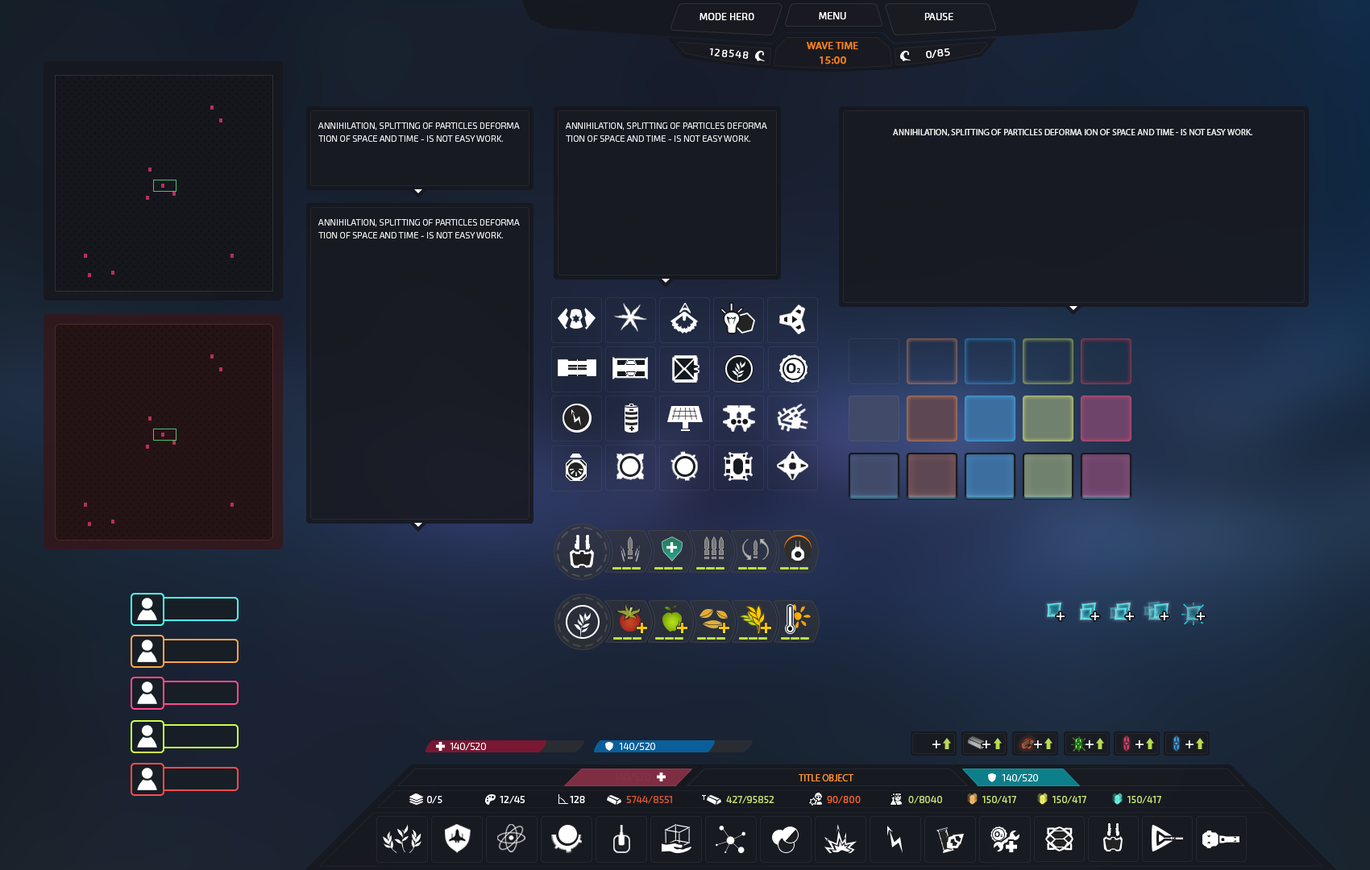
<style>
.page{position:relative;width:1370px;height:870px}
.page>*{position:absolute;margin:0}
.t1{font:9.7px "Exo2.0-Light";color:#ffffff;text-transform:uppercase;font-weight:bold}
.t2{font:9.7px/14.5px "MyriadPro-Regular";color:#f1801c;text-transform:uppercase;font-weight:bold;scale:1.1 1}
.t3{font:10.5px/14.5px "MyriadPro-Regular";color:#f1801c;text-transform:uppercase;font-weight:bold;scale:1.1 1}
.t4{font:9.7px "Exo2.0-Light";letter-spacing:0.12em;color:#ffffff;text-transform:uppercase;font-weight:bold}
.t5{font:9.7px "Exo2.0-Light";color:#ffffff;text-transform:uppercase;font-weight:bold;scale:1.1 1}
.t6{font:8.9px/12.9px "Exo2.0-Light";color:#ffffff;text-transform:uppercase}
.t7{font:8.9px "MyriadPro-Regular";color:#ffffff;text-transform:uppercase}
.t8{font:14.8px "Calibri-Bold";color:#181e25;font-weight:bold}
.t9{font:7.4px "Calibri-Bold";color:#181e25;font-weight:bold}
.t10{font:9.7px "Exo2.0-Light";color:#ffffff;text-transform:uppercase}
.t11{font:9.7px "Exo2.0-Light";color:#853348;text-transform:uppercase}
.t12{font:9.7px "MyriadPro-Regular";color:#fe942d;text-transform:uppercase}
.t13{font:9.7px "Exo2.0-Medium";color:#ffffff;text-transform:uppercase}
.t14{font:9.7px "Exo2.0-Medium";color:#d3562d;text-transform:uppercase}
.t15{font:9.7px "Exo2.0-Medium";color:#c3e172;text-transform:uppercase}
.t16{font:9.7px "Exo2.0-Medium";color:#f1602d;text-transform:uppercase}
.t17{font:8.4px "Calibri-Bold";color:#181e25;font-weight:bold}
.t18{font:4.2px "Calibri-Bold";color:#181e25;font-weight:bold}
</style>
<div class="page">
<p class="t1" style="left:700px;top:13px;width:54px;height:8px">mode hero</p>
<p class="t1" style="left:819px;top:12px;width:27px;height:8px">Menu</p>
<p class="t1" style="left:924px;top:13px;width:29px;height:8px">pause</p>
<p class="t2" style="left:807px;top:42px;width:51px;height:22px;text-align:center">wave time<br><span class="t3">15:00</span></p>
<p class="t4" style="left:709px;top:48px;width:40px;height:11px;rotate:5deg">128548</p>
<p class="t5" style="left:926px;top:48px;width:24px;height:11px;rotate:-6deg">0/85</p>
<p class="t6" style="left:318px;top:122px;width:202px;height:20px">Annihilation, splitting of particles deforma<br>tion of space and time - is not easy work.</p>
<p class="t6" style="left:566px;top:122px;width:201px;height:20px">Annihilation, splitting of particles deforma<br>tion of space and time - is not easy work.</p>
<p class="t7" style="left:893px;top:129px;width:359px;height:7px">Annihilation, splitting of particles deforma ion of space and time - is not easy work.</p>
<p class="t6" style="left:318px;top:219px;width:202px;height:20px">Annihilation, splitting of particles deforma<br>tion of space and time - is not easy work.</p>
<p class="t8" style="left:787px;top:363px;width:13px;height:11px">O<span class="t9">2</span></p>
<p class="t10" style="left:450px;top:743px;width:36px;height:8px">140/520</p>
<p class="t10" style="left:619px;top:743px;width:36px;height:8px">140/520</p>
<p class="t11" style="left:614px;top:774px;width:36px;height:8px">140/520</p>
<p class="t12" style="left:799px;top:774px;width:54px;height:8px">title object</p>
<p class="t10" style="left:1002px;top:774px;width:36px;height:9px">140/520</p>
<p class="t13" style="left:427px;top:796px;width:15px;height:8px">0/5</p>
<p class="t13" style="left:500px;top:796px;width:25px;height:8px">12/45</p>
<p class="t13" style="left:570px;top:796px;width:15px;height:7px">128</p>
<p class="t14" style="left:626px;top:796px;width:46px;height:8px">5744/8551</p>
<p class="t15" style="left:726px;top:796px;width:48px;height:8px">427/95852</p>
<p class="t16" style="left:827px;top:796px;width:34px;height:8px">90/800</p>
<p class="t15" style="left:908px;top:796px;width:34px;height:8px">0/8040</p>
<p class="t15" style="left:982px;top:796px;width:34px;height:8px">150/417</p>
<p class="t15" style="left:1053px;top:796px;width:33px;height:8px">150/417</p>
<p class="t15" style="left:1127px;top:796px;width:34px;height:8px">150/417</p>
<p class="t17" style="left:994px;top:832px;width:9px;height:5px">O<span class="t18">2</span></p>
</div>
